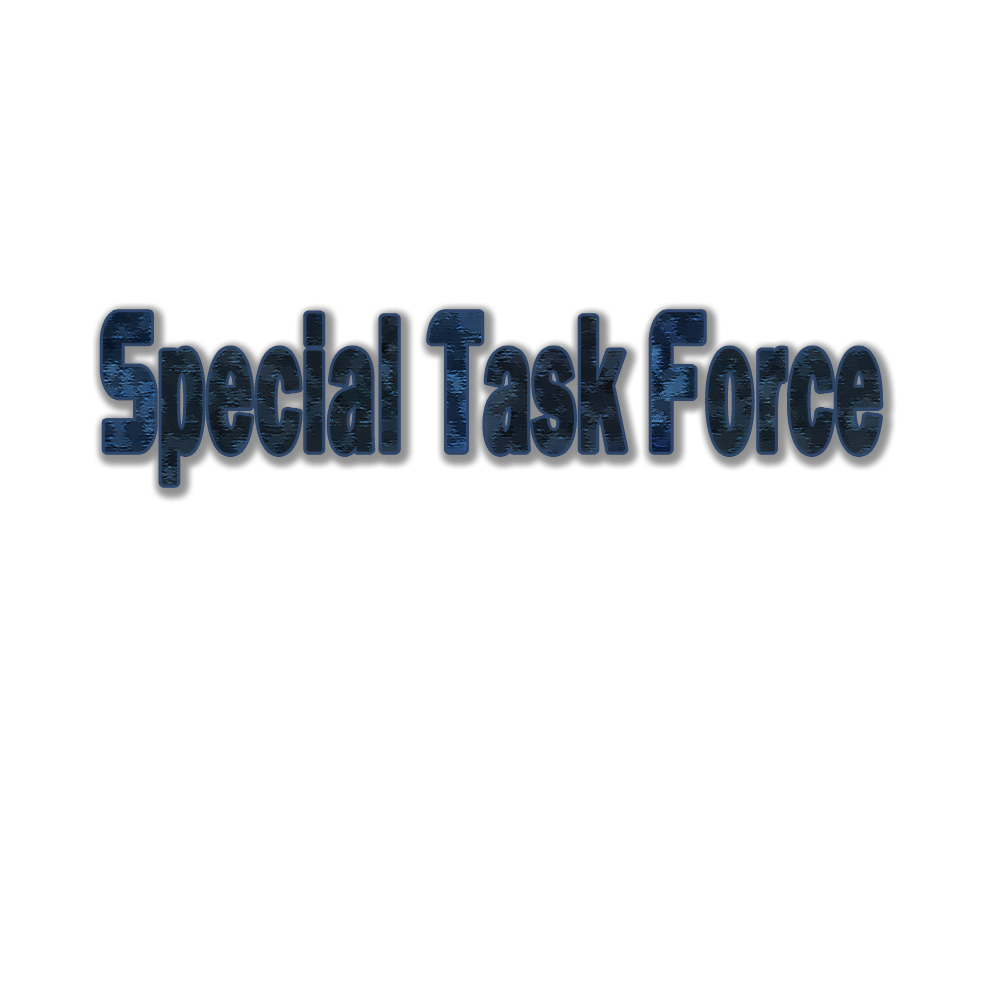
<style>
.page{position:relative;width:1000px;height:1000px;background:#ffffff}
.page>*{position:absolute;margin:0}
.t1{font:198.3px "FranklinGothic-Demi";letter-spacing:0.02em;color:#1b2836;font-weight:bold;scale:0.42 1}
.t2{font:198.3px "Flatwheat-Regular";letter-spacing:0.02em;color:#1b2836;font-weight:bold;scale:0.42 1}
</style>
<div class="page">
<p class="t1" style="left:102px;top:312px;width:779px;height:173px"><span class="t2">S</span>pecial <span class="t2">T</span>ask <span class="t2">F</span>orce</p>
</div>
